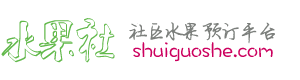
<style>
.page{position:relative;width:300px;height:80px;background:#ffffff}
.page>*{position:absolute;margin:0}
.t1{font:40px "Ò¶¸ùÓÑÌØÉ«¿ÕÐÄ¼òÌåÖÕ¼«°æ";letter-spacing:-0.05em;color:#63b94c}
.t2{font:20px "-smyzt";letter-spacing:-0.075em;color:#7c7f7c}
.t3{font:22px "DFWaWaSC-W5";color:#cc005e}
</style>
<div class="page">
<p class="t1" style="left:1px;top:18px;width:114px;height:45px">水果社</p>
<p class="t2" style="left:129px;top:22px;width:146px;height:22px">社区水果预订平台</p>
<p class="t3" style="left:133px;top:42px;width:140px;height:20px">shuiguoshe.com</p>
</div>
